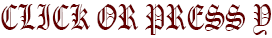
<style>
.page{position:relative;width:272px;height:38px;background:#ffffff}
.page>*{position:absolute;margin:0}
.t1{font:35.2px "OldEnglishTextMT";color:#630000;scale:0.7 1}
</style>
<div class="page">
<p class="t1" style="left:1px;top:4px;width:270px;height:31px">CLICK OR PRESS Y</p>
</div>
